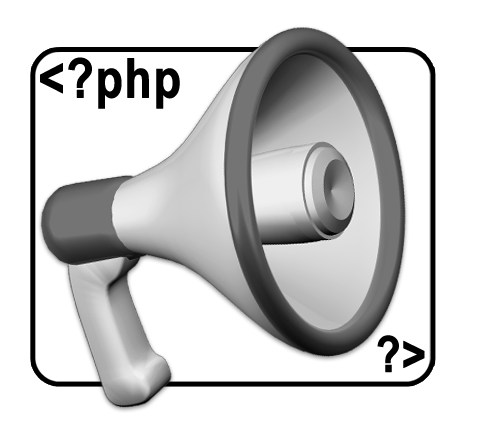
<style>
.page{position:relative;width:501px;height:448px;background:#ffffff}
.page>*{position:absolute;margin:0}
.t1{font:55.1px "ArialNarrow-Bold";color:#000000;font-weight:bold}
.t2{font:50px "ArialNarrow-Bold";color:#000000;font-weight:bold}
</style>
<div class="page">
<p class="t1" style="left:40px;top:57px;width:140px;height:52px">&lt;?php</p>
<p class="t2" style="left:377px;top:335px;width:48px;height:38px">?&gt;</p>
</div>
